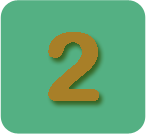
<style>
.page{position:relative;width:146px;height:134px;background:#54b083}
.page>*{position:absolute;margin:0}
.t1{font:94.7px "ArialRoundedMTBold";letter-spacing:-0.01em;color:#a87f28;font-weight:bold}
</style>
<div class="page">
<p class="t1" style="left:48px;top:32px;width:51px;height:69px">2</p>
</div>
